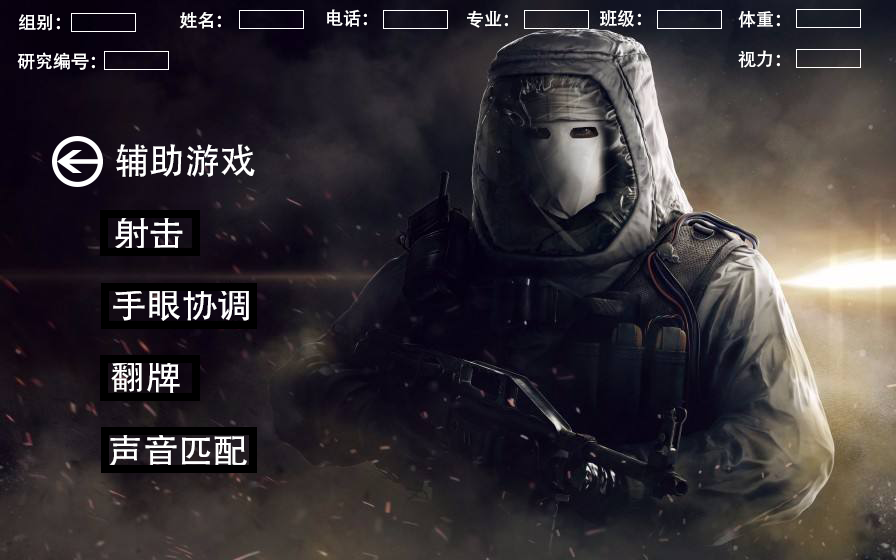
<style>
.page{position:relative;width:896px;height:560px}
.page>*{position:absolute;margin:0}
.t1{font:18px "AdobeHeitiStd-Regular";color:#ffffff}
.t2{font:35.4px "AdobeHeitiStd-Regular";color:#ffffff}
</style>
<div class="page">
<p class="t1" style="left:19px;top:14px;width:41px;height:17px">组别：</p>
<p class="t1" style="left:179px;top:12px;width:42px;height:17px">姓名：</p>
<p class="t1" style="left:327px;top:9px;width:40px;height:18px">电话：</p>
<p class="t1" style="left:467px;top:10px;width:41px;height:18px">专业：</p>
<p class="t1" style="left:600px;top:10px;width:41px;height:17px">班级：</p>
<p class="t1" style="left:738px;top:10px;width:42px;height:18px">体重：</p>
<p class="t1" style="left:17px;top:52px;width:78px;height:18px">研究编号：</p>
<p class="t1" style="left:738px;top:50px;width:42px;height:18px">视力：</p>
<p class="t2" style="left:116px;top:144px;width:139px;height:33px">辅助游戏</p>
<p class="t2" style="left:115px;top:217px;width:68px;height:33px">射击</p>
<p class="t2" style="left:113px;top:287px;width:136px;height:35px">手眼协调</p>
<p class="t2" style="left:111px;top:360px;width:69px;height:34px">翻牌</p>
<p class="t2" style="left:109px;top:434px;width:138px;height:34px">声音匹配</p>
</div>
